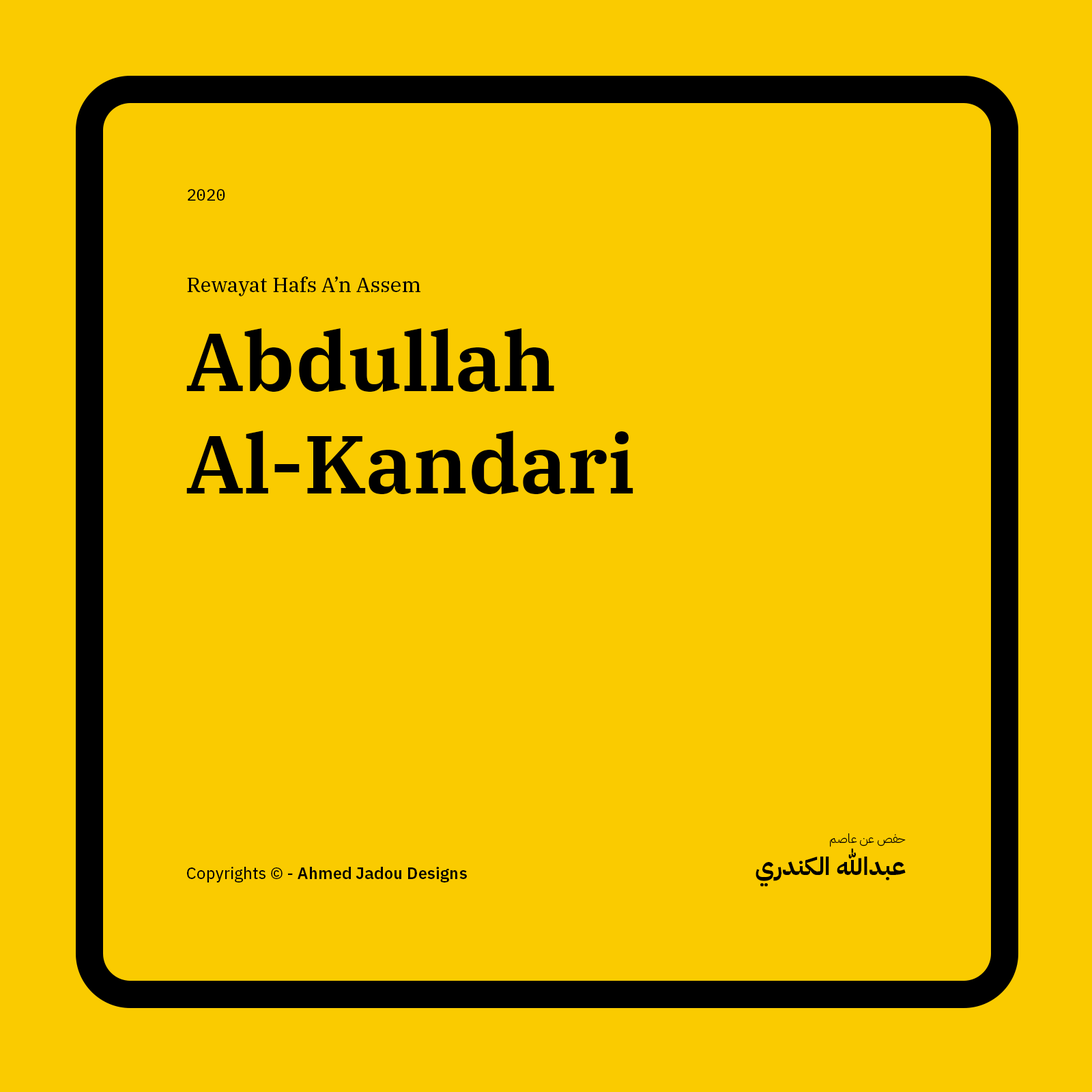
<style>
.page{position:relative;width:1092px;height:1092px;background:#facb00}
.page>*{position:absolute;margin:0}
.t1{font:16.4px "IBMPlexMono-Text";color:#000000}
.t2{font:20.5px "IBMPlexSerif-Text";color:#000000}
.t3{font:81.9px/102.7px "IBMPlexSerif-SemiBold";color:#000000}
.t4{font:12.3px "IBMPlexArabic-Light";color:#000000}
.t5{font:24.6px "IBMPlexArabic-Bold";color:#000000}
.t6{font:16.4px "IBMPlexSans-SemiBold";color:#000000}
.t7{font:16.4px "IBMPlexSans-Text";color:#000000}
</style>
<div class="page">
<p class="t1" style="left:188px;top:189px;width:37px;height:12px">2020</p>
<p class="t2" style="left:187px;top:276px;width:233px;height:20px">Rewayat Hafs A’n Assem</p>
<p class="t3" style="left:186px;top:328px;width:447px;height:166px">Abdullah Al-Kandari</p>
<p class="t4" style="left:830px;top:833px;width:76px;height:14px">حفص عن عاصم</p>
<p class="t5" style="left:756px;top:848px;width:150px;height:39px">عبدالله الكندري</p>
<p class="t6" style="left:187px;top:867px;width:280px;height:15px"><span class="t7">Copyrights © - </span>Ahmed Jadou Designs</p>
</div>
